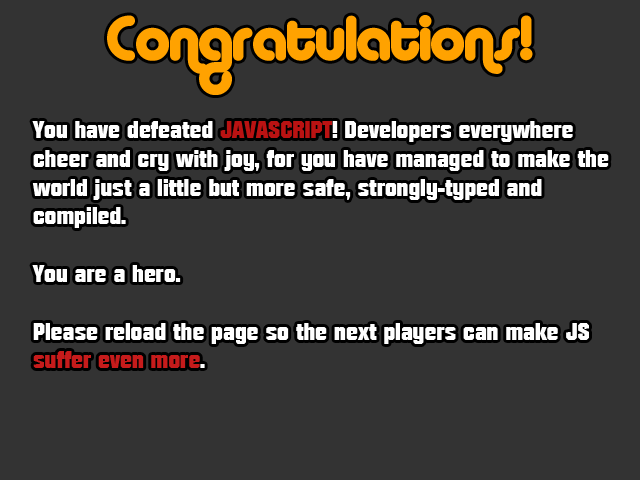
<style>
.page{position:relative;width:640px;height:480px;background:#333333}
.page>*{position:absolute;margin:0}
.t1{font:60px "AlbaMatter";color:#ffa200}
.t2{font:24px "Autumn";color:#ffffff}
.t3{font:24px "Autumn";color:#ba1212}
.t4{font:24px "Autumn";color:#c61b1b}
</style>
<div class="page">
<p class="t1" style="left:107px;top:15px;width:426px;height:80px">Congratulations!</p>
<p class="t2" style="left:32px;top:121px;width:577px;height:247px">You have defeated <span class="t3">JAVASCRIPT</span>! Developers everywhere<br>cheer and cry with joy, for you have managed to make the<br>world just a little but more safe, strongly-typed and<br>compiled. <br><br>You are a hero.<br><br>Please reload the page so the next players can make JS<br><span class="t4">suffer even more</span>.</p>
</div>
